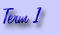
<style>
.page{position:relative;width:60px;height:35px;background:#ccccff}
.page>*{position:absolute;margin:0}
.t1{font:25px "Freehand575BT-RegularB"}
</style>
<div class="page">
<p class="t1" style="left:3px;top:7px;width:39px;height:17px">Term 1</p>
</div>
